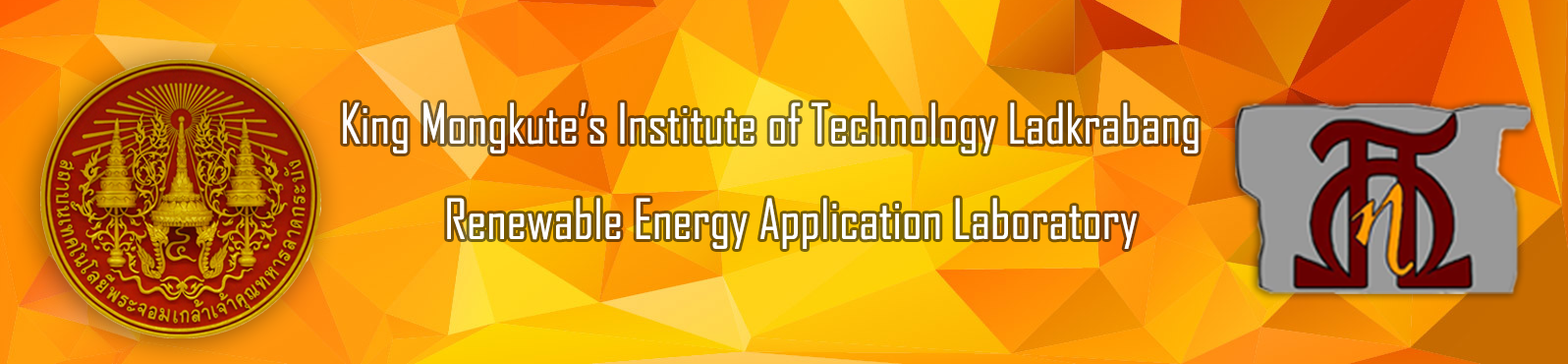
<style>
.page{position:relative;width:1568px;height:364px}
.page>*{position:absolute;margin:0}
.t1{font:53.2px "AgencyFB-Reg";color:#ffffff}
</style>
<div class="page">
<p class="t1" style="left:343px;top:102px;width:856px;height:51px">King Mongkute’s Institute of Technology Ladkrabang</p>
<p class="t1" style="left:447px;top:197px;width:690px;height:52px">Renewable Energy Application Laboratory</p>
</div>
